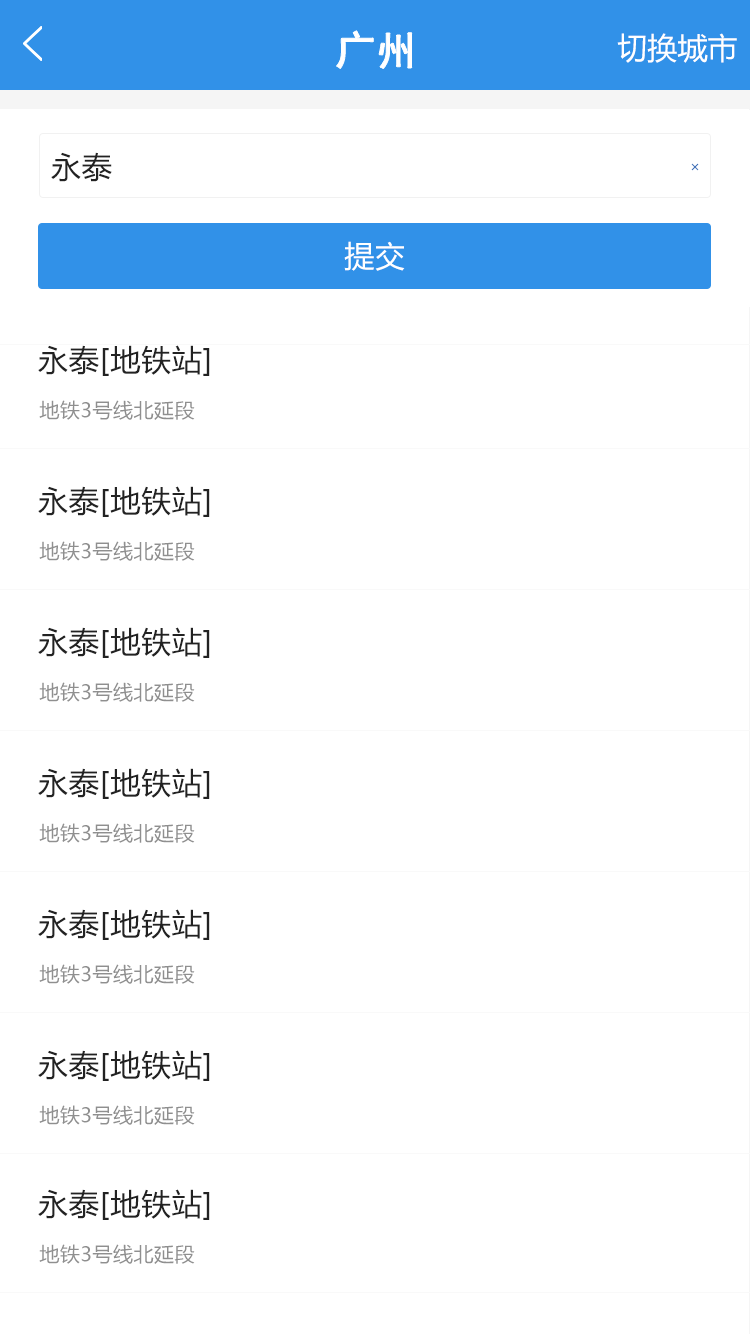
<style>
.page{position:relative;width:750px;height:1334px;background:#ffffff}
.page>*{position:absolute;margin:0}
.t1{font:40px "SimHei";color:#ffffff;font-weight:bold}
.t2{font:30px "MicrosoftYaHei";color:#ffffff}
.t3{font:30px "MicrosoftYaHei";letter-spacing:0.025em;color:#222222}
.t4{font:30px "MicrosoftYaHei";letter-spacing:0.025em;color:#ffffff}
.t5{font:20px "MicrosoftYaHei";letter-spacing:0.025em;color:#8f8f8f}
</style>
<div class="page">
<p class="t1" style="left:336px;top:30px;width:76px;height:39px">广州</p>
<p class="t2" style="left:617px;top:33px;width:120px;height:30px">切换城市</p>
<p class="t3" style="left:51px;top:152px;width:61px;height:30px">永泰</p>
<p class="t4" style="left:344px;top:241px;width:61px;height:30px">提交</p>
<p class="t3" style="left:38px;top:345px;width:172px;height:31px">永泰[地铁站]</p>
<p class="t5" style="left:39px;top:400px;width:156px;height:20px">地铁3号线北延段</p>
<p class="t3" style="left:38px;top:486px;width:172px;height:31px">永泰[地铁站]</p>
<p class="t5" style="left:39px;top:541px;width:156px;height:20px">地铁3号线北延段</p>
<p class="t3" style="left:38px;top:627px;width:172px;height:31px">永泰[地铁站]</p>
<p class="t5" style="left:39px;top:682px;width:156px;height:20px">地铁3号线北延段</p>
<p class="t3" style="left:38px;top:768px;width:172px;height:31px">永泰[地铁站]</p>
<p class="t5" style="left:39px;top:823px;width:156px;height:20px">地铁3号线北延段</p>
<p class="t3" style="left:38px;top:909px;width:172px;height:31px">永泰[地铁站]</p>
<p class="t5" style="left:39px;top:964px;width:156px;height:20px">地铁3号线北延段</p>
<p class="t3" style="left:38px;top:1050px;width:172px;height:31px">永泰[地铁站]</p>
<p class="t5" style="left:39px;top:1105px;width:156px;height:20px">地铁3号线北延段</p>
<p class="t3" style="left:38px;top:1189px;width:172px;height:31px">永泰[地铁站]</p>
<p class="t5" style="left:39px;top:1244px;width:156px;height:20px">地铁3号线北延段</p>
</div>
